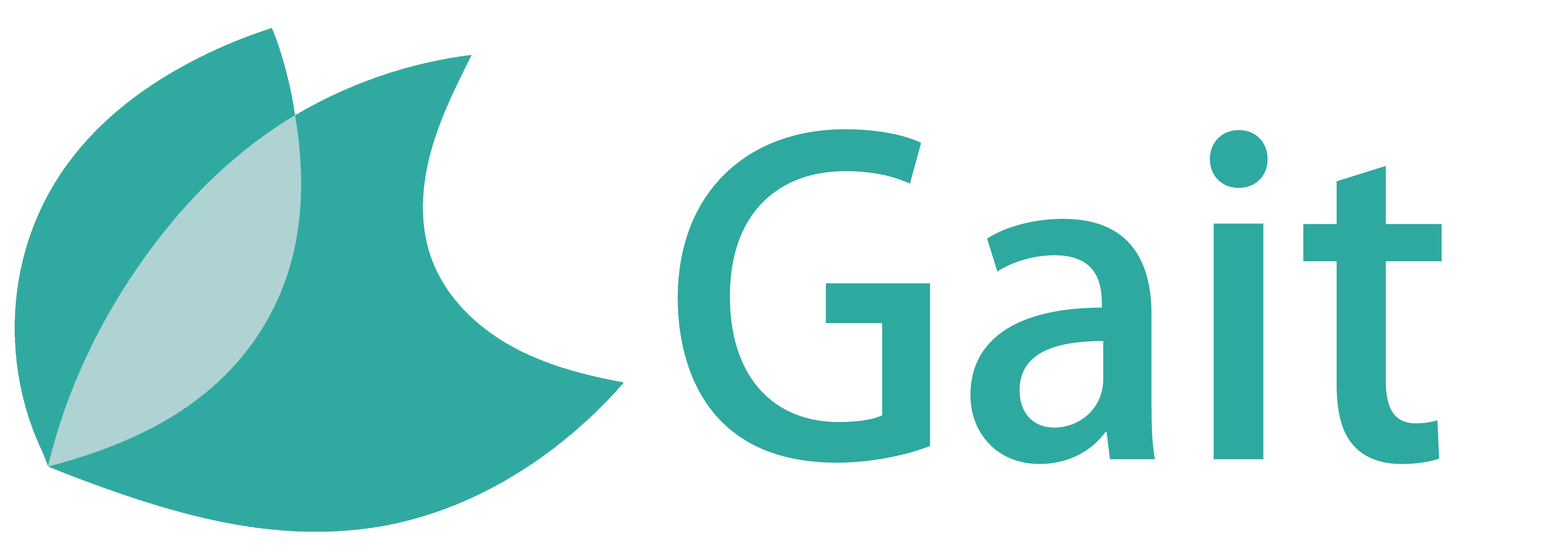
<style>
.page{position:relative;width:1568px;height:560px;background:#ffffff}
.page>*{position:absolute;margin:0}
.t1{font:426.7px "AdobeHeitiStd-Regular";color:#2ea99f}
</style>
<div class="page">
<p class="t1" style="left:678px;top:129px;width:764px;height:335px">Gait</p>
</div>
